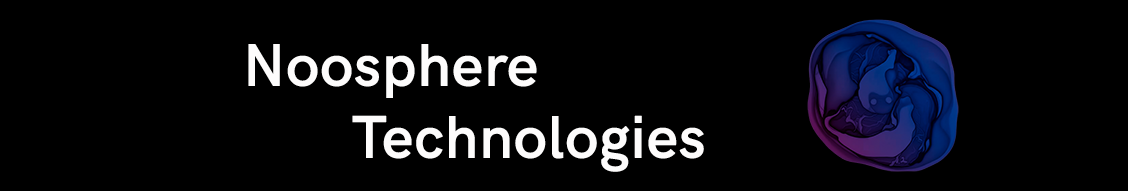
<style>
.page{position:relative;width:1128px;height:191px;background:#000000}
.page>*{position:absolute;margin:0}
.t1{font:60px "HKGrotesk-SemiBold";color:#fdfcfc;font-weight:bold}
</style>
<div class="page">
<p class="t1" style="left:248px;top:44px;width:456px;height:128px">Noosphere<br>       Technologies</p>
</div>
